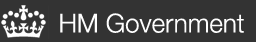
<style>
.page{position:relative;width:256px;height:42px;background:#333333}
.page>*{position:absolute;margin:0}
.t1{font:26px "HelveticaNeue-Light";color:#ffffff}
</style>
<div class="page">
<p class="t1" style="left:60px;top:13px;width:184px;height:20px">HM Government</p>
</div>
